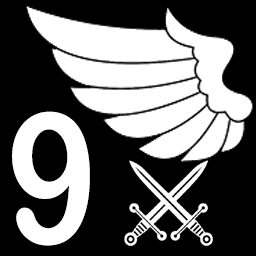
<style>
.page{position:relative;width:256px;height:256px;background:#000000}
.page>*{position:absolute;margin:0}
.t1{font:182.4px "ArialRoundedMTBold";color:#ffffff;font-variant:small-caps;scale:0.83 1}
</style>
<div class="page">
<p class="t1" style="left:12px;top:111px;width:78px;height:135px">9</p>
</div>
